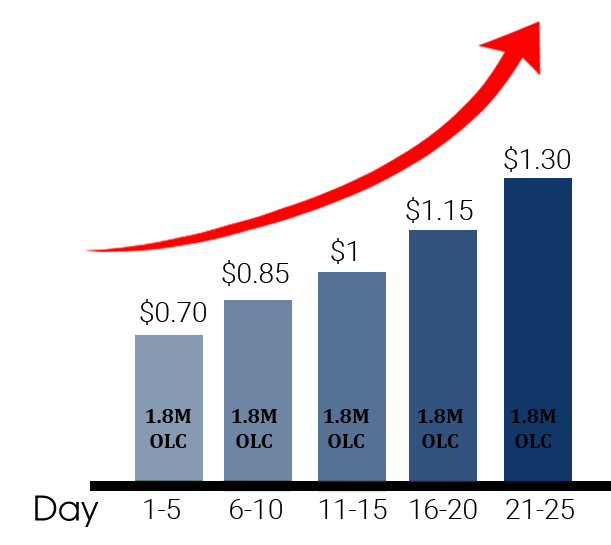
<style>
.page{position:relative;width:611px;height:545px;background:#ffffff}
.page>*{position:absolute;margin:0}
.t1{font:28px "Roboto-Light";color:#020100}
.t2{font:20.8px "Cambria-Bold";color:#020100}
</style>
<div class="page">
<p class="t1" style="left:504px;top:146px;width:66px;height:26px">$1.30</p>
<p class="t1" style="left:406px;top:197px;width:67px;height:26px">$1.15</p>
<p class="t1" style="left:331px;top:238px;width:25px;height:26px">$1</p>
<p class="t1" style="left:222px;top:260px;width:67px;height:26px">$0.85</p>
<p class="t1" style="left:140px;top:299px;width:66px;height:26px">$0.70</p>
<p class="t2" style="left:146px;top:409px;width:45px;height:39px;text-align:center">1.8M<br>OLC</p>
<p class="t2" style="left:232px;top:409px;width:45px;height:39px;text-align:center">1.8M<br>OLC</p>
<p class="t2" style="left:324px;top:409px;width:45px;height:39px;text-align:center">1.8M<br>OLC</p>
<p class="t2" style="left:418px;top:409px;width:45px;height:39px;text-align:center">1.8M<br>OLC</p>
<p class="t2" style="left:511px;top:409px;width:45px;height:39px;text-align:center">1.8M<br>OLC</p>
<p class="t1" style="left:144px;top:499px;width:430px;height:20px">1-5       6-10     11-15   16-20    21-25</p>
</div>
